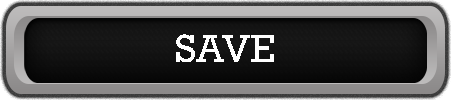
<style>
.page{position:relative;width:451px;height:100px}
.page>*{position:absolute;margin:0}
.t1{font:39.8px "Rockwell";color:#ffffff}
</style>
<div class="page">
<p class="t1" style="left:176px;top:34px;width:98px;height:28px">SAVE</p>
</div>
